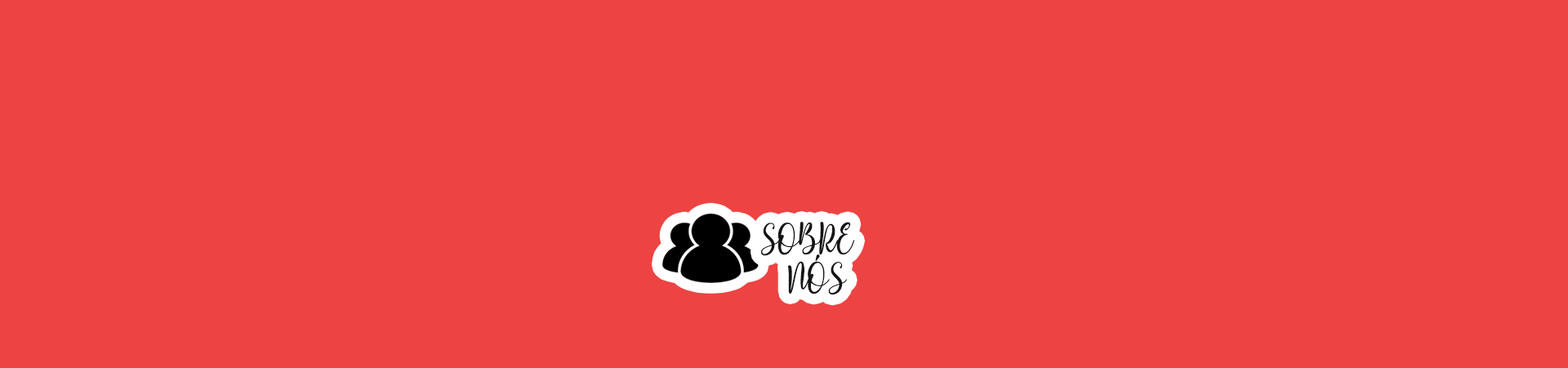
<style>
.page{position:relative;width:1568px;height:368px;background:#ed4343}
.page>*{position:absolute;margin:0}
.t1{font:37.3px/39px "betterPersonalUse";color:#151515}
</style>
<div class="page">
<p class="t1" style="left:760px;top:221px;width:95px;height:74px;text-align:center">SOBRE<br> NÓS</p>
</div>
